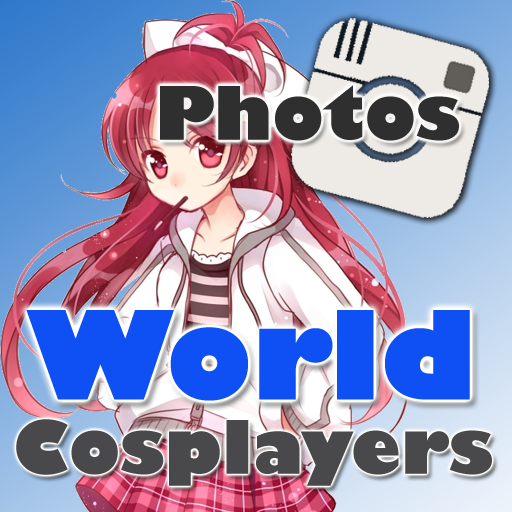
<style>
.page{position:relative;width:512px;height:512px}
.page>*{position:absolute;margin:0}
.t1{font:72px "GillSans-UltraBold";color:#2f2f2f}
.t2{font:120px "GillSans-UltraBold";color:#0f50f4}
.t3{font:72px "GillSans-UltraBold";color:#49494b}
</style>
<div class="page">
<p class="t1" style="left:160px;top:85px;width:299px;height:56px">Photos</p>
<p class="t2" style="left:26px;top:310px;width:444px;height:91px">World</p>
<p class="t3" style="left:16px;top:419px;width:476px;height:67px">Cosplayers</p>
</div>
